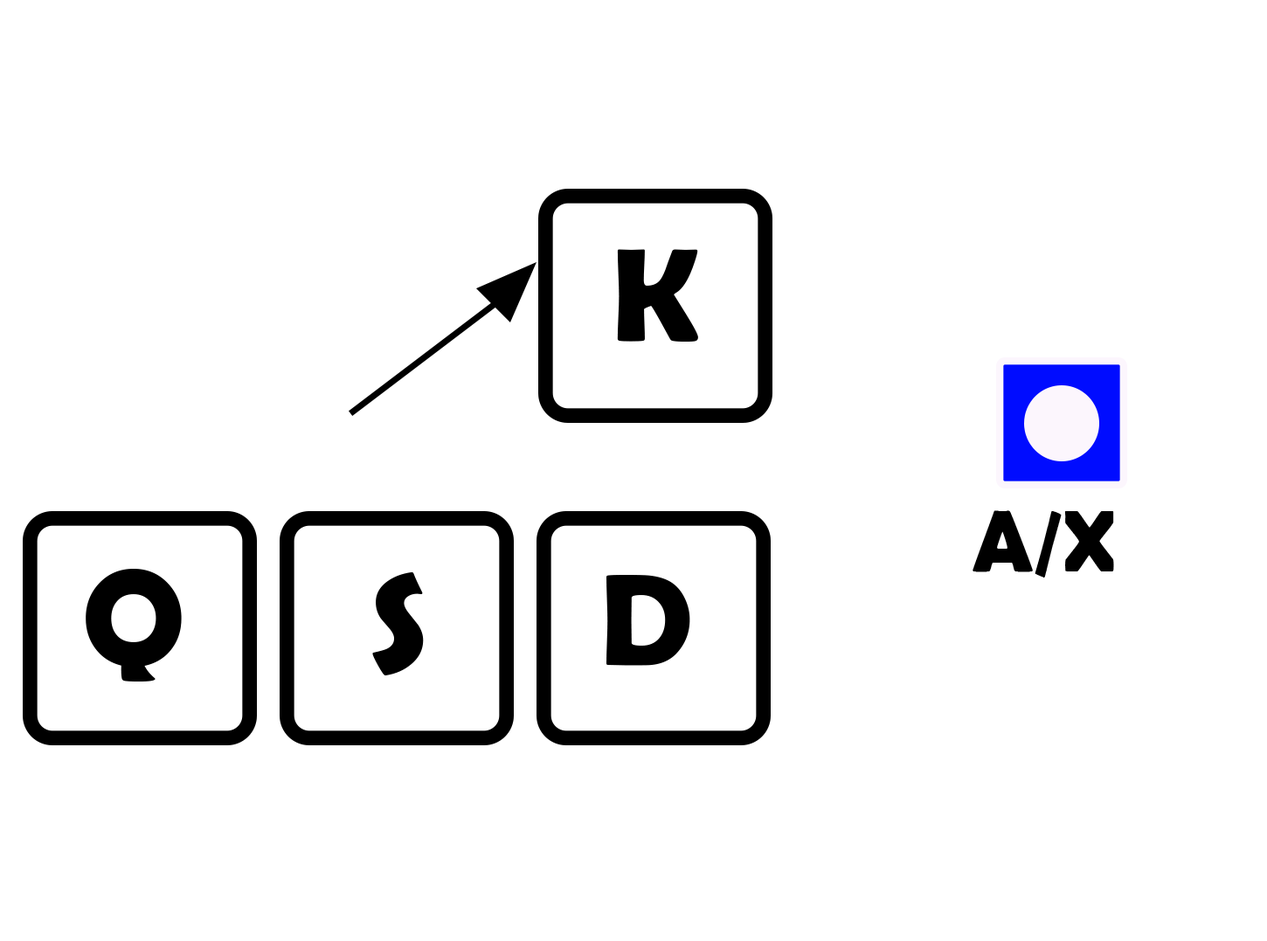
<style>
.page{position:relative;width:1267px;height:941px;background:#ffffff}
.page>*{position:absolute;margin:0}
.t1{font:133.8px "BerlinSansFBDemi-Bold";color:#000000}
.t2{font:87.4px "BerlinSansFBDemi-Bold";color:#000000}
.t3{font:137.2px "BerlinSansFBDemi-Bold";color:#000000}
.t4{font:141.9px "BerlinSansFBDemi-Bold";color:#000000}
.t5{font:130.7px "BerlinSansFBDemi-Bold";color:#000000}
</style>
<div class="page">
<p class="t1" style="left:617px;top:249px;width:81px;height:93px">KK</p>
<p class="t2" style="left:973px;top:510px;width:141px;height:68px">A/X</p>
<p class="t3" style="left:86px;top:569px;width:96px;height:113px">Q</p>
<p class="t4" style="left:372px;top:572px;width:52px;height:103px">S</p>
<p class="t5" style="left:606px;top:575px;width:84px;height:91px">D</p>
</div>
